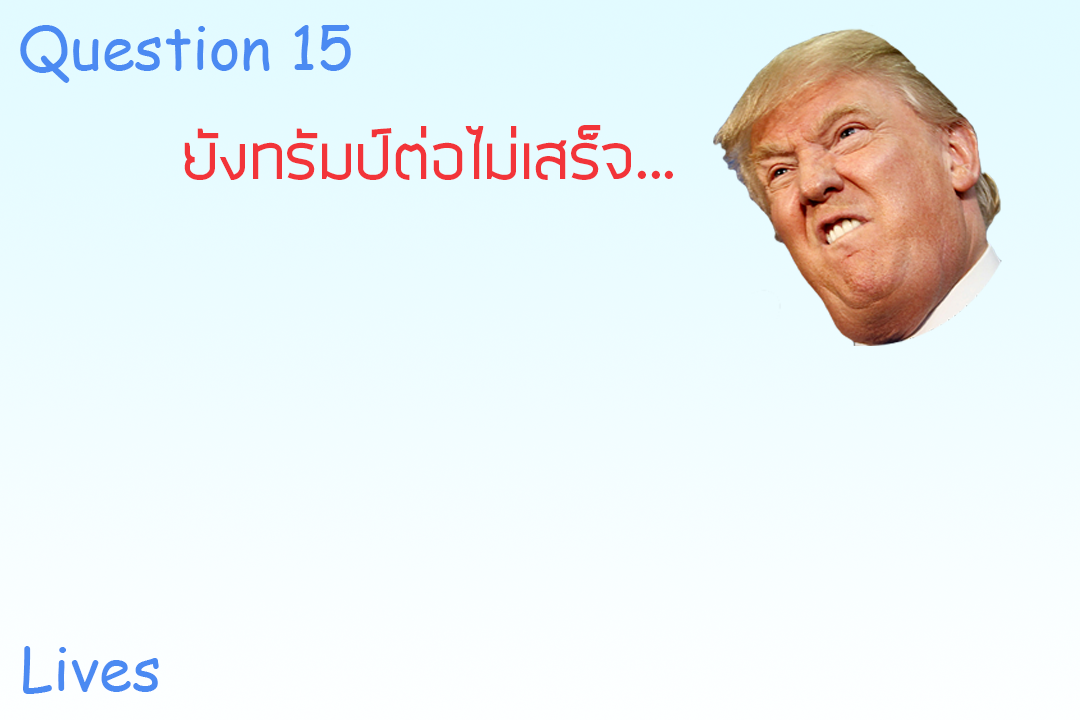
<style>
.page{position:relative;width:1080px;height:720px}
.page>*{position:absolute;margin:0}
.t1{font:60px "ComicSansMS";color:#4b8af2}
.t2{font:72px "SuperspaceRegular";color:#f23439}
.t3{font:59.6px "ComicSansMS";color:#4b8af2}
</style>
<div class="page">
<p class="t1" style="left:20px;top:24px;width:331px;height:59px">Question 15</p>
<p class="t2" style="left:184px;top:125px;width:489px;height:55px">ยังทรัมป์ต่อไม่เสร็จ...</p>
<p class="t3" style="left:23px;top:646px;width:136px;height:48px">Lives</p>
</div>
